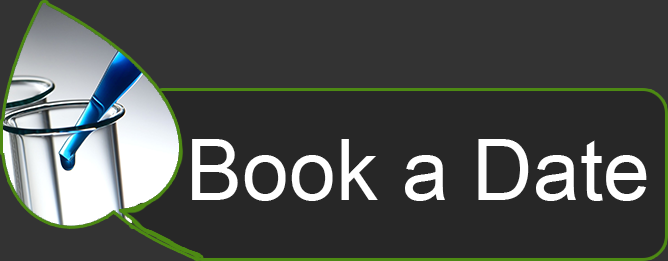
<style>
.page{position:relative;width:668px;height:261px;background:#272727}
.page>*{position:absolute;margin:0}
.t1{font:84.5px "ArialMT";color:#ffffff}
</style>
<div class="page">
<p class="t1" style="left:192px;top:139px;width:455px;height:62px">Book a Date</p>
</div>
